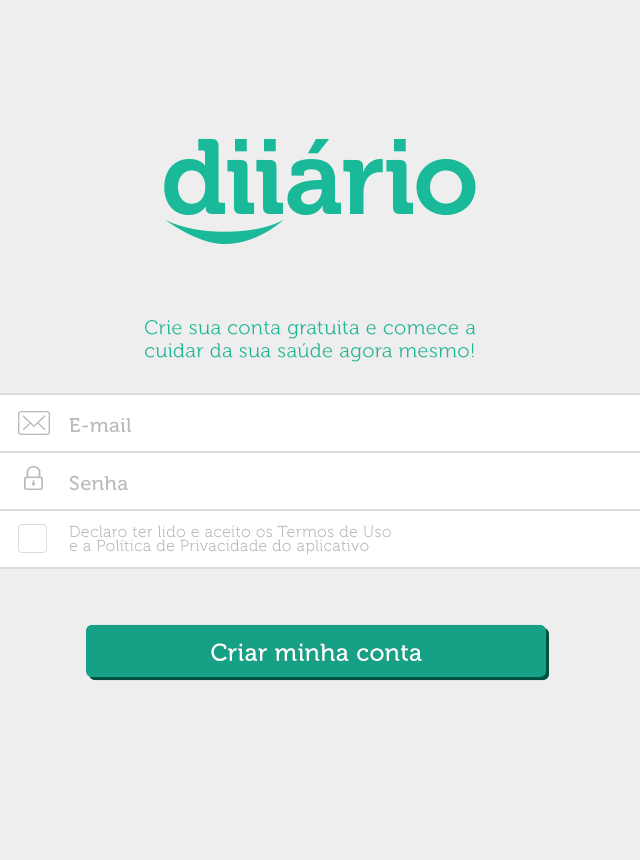
<style>
.page{position:relative;width:640px;height:860px;background:#eeeeee}
.page>*{position:absolute;margin:0}
.t1{font:20px/23px "Museo300-Regular";letter-spacing:0.02em;color:#19b99a}
.t2{font:20px "Museo500-Regular";letter-spacing:0.02em;color:#bbbbbb}
.t3{font:16px/14px "Museo300-Regular";letter-spacing:0.02em;color:#bbbbbb}
.t4{font:24px "Museo500-Regular";letter-spacing:0.02em;color:#ffffff}
</style>
<div class="page">
<p class="t1" style="left:145px;top:320px;width:331px;height:42px;text-align:center">Crie sua conta gratuita e comece a<br>cuidar da sua saúde agora mesmo!</p>
<p class="t2" style="left:69px;top:418px;width:62px;height:15px">E-mail</p>
<p class="t2" style="left:69px;top:475px;width:59px;height:16px">Senha</p>
<p class="t3" style="left:69px;top:525px;width:322px;height:30px">Declaro ter lido e aceito os Termos de Uso<br>e a Política de Privacidade do aplicativo</p>
<p class="t4" style="left:211px;top:643px;width:211px;height:18px">Criar minha conta</p>
</div>
